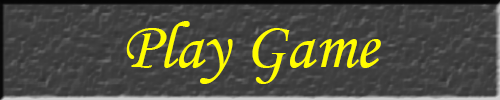
<style>
.page{position:relative;width:500px;height:100px}
.page>*{position:absolute;margin:0}
.t1{font:67px "MonotypeCorsiva";color:#fffc00}
</style>
<div class="page">
<p class="t1" style="left:126px;top:21px;width:255px;height:63px">Play Game</p>
</div>
